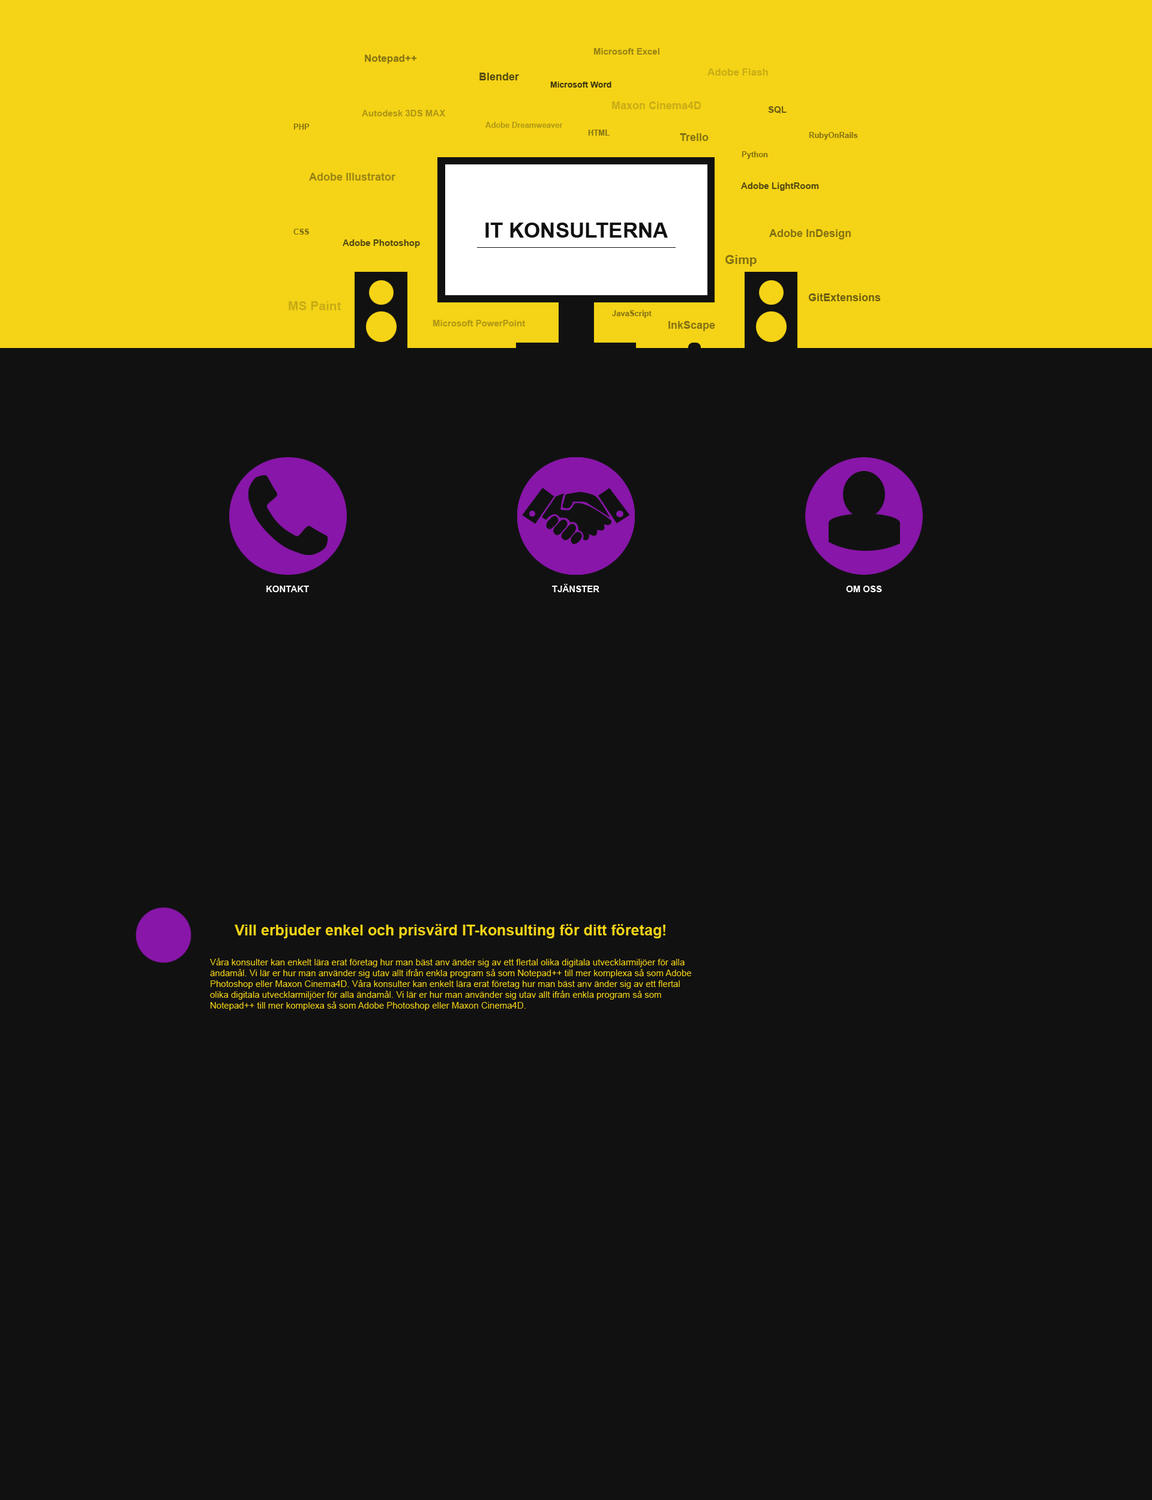
<style>
.page{position:relative;width:1152px;height:1500px;background:#111111}
.page>*{position:absolute;margin:0}
.t1{font:9px "Arial-BoldMT";color:#9a8514}
.t2{font:10.2px "Arial-BoldMT";color:#837213}
.t3{font:10.8px "Arial-BoldMT";color:#554b12}
.t4{font:10.2px "Arial-BoldMT";color:#c7ac15}
.t5{font:8.4px "Arial-BoldMT";color:#3f3812}
.t6{font:10.8px "Arial-BoldMT";color:#c7ac15}
.t7{font:9px "Arial-BoldMT";color:#b09814}
.t8{font:9px "Arial-BoldMT";color:#6c5f13}
.t9{font:7.8px "Arial-BoldMT";color:#837213}
.t10{font:7.8px "Arial-BoldMT";color:#b09814}
.t11{font:10.8px "Arial-BoldMT";color:#837213}
.t12{font:10.8px "Arial-BoldMT";color:#9a8514}
.t13{font:9px "Arial-BoldMT";color:#554b12}
.t14{font:21px "Arial-BoldMT";color:#111111}
.t15{font:12.6px "Arial-BoldMT";color:#837213}
.t16{font:10.8px "Arial-BoldMT";color:#6c5f13}
.t17{font:12.6px "Arial-BoldMT";color:#c7ac15}
.t18{font:9px "Arial-BoldMT";color:#ffffff}
.t19{font:15px "Arial-BoldMT";color:#f5d316}
.t20{font:9px "ArialMT";color:#f5d316}
</style>
<div class="page">
<p class="t1" style="left:593px;top:48px;width:66px;height:7px">Microsoft Excel</p>
<p class="t2" style="left:365px;top:55px;width:52px;height:9px">Notepad++</p>
<p class="t3" style="left:479px;top:73px;width:40px;height:7px">Blender</p>
<p class="t4" style="left:707px;top:68px;width:61px;height:8px">Adobe Flash</p>
<p class="t5" style="left:550px;top:82px;width:61px;height:6px">Microsoft Word</p>
<p class="t6" style="left:612px;top:101px;width:89px;height:8px">Maxon Cinema4D</p>
<p class="t7" style="left:362px;top:110px;width:84px;height:6px">Autodesk 3DS MAX</p>
<p class="t8" style="left:768px;top:106px;width:19px;height:7px">SQL</p>
<p class="t9" style="left:293px;top:124px;width:17px;height:6px">PHP</p>
<p class="t10" style="left:485px;top:122px;width:78px;height:6px">Adobe Dreamweaver</p>
<p class="t9" style="left:588px;top:130px;width:22px;height:6px">HTML</p>
<p class="t11" style="left:680px;top:133px;width:29px;height:8px">Trello</p>
<p class="t9" style="left:809px;top:132px;width:49px;height:8px">RubyOnRails</p>
<p class="t9" style="left:742px;top:151px;width:26px;height:8px">Python</p>
<p class="t12" style="left:309px;top:173px;width:86px;height:8px">Adobe Illustrator</p>
<p class="t13" style="left:741px;top:182px;width:78px;height:9px">Adobe LightRoom</p>
<p class="t9" style="left:293px;top:229px;width:17px;height:6px">CSS</p>
<p class="t14" style="left:485px;top:223px;width:183px;height:15px">IT KONSULTERNA</p>
<p class="t11" style="left:769px;top:229px;width:82px;height:10px">Adobe InDesign</p>
<p class="t13" style="left:343px;top:239px;width:77px;height:9px">Adobe Photoshop</p>
<p class="t15" style="left:725px;top:255px;width:32px;height:11px">Gimp</p>
<p class="t16" style="left:808px;top:293px;width:73px;height:8px">GitExtensions</p>
<p class="t17" style="left:289px;top:301px;width:52px;height:9px">MS Paint</p>
<p class="t9" style="left:612px;top:310px;width:40px;height:8px">JavaScript</p>
<p class="t7" style="left:433px;top:320px;width:92px;height:6px">Microsoft PowerPoint</p>
<p class="t11" style="left:668px;top:321px;width:47px;height:10px">InkScape</p>
<p class="t18" style="left:266px;top:586px;width:43px;height:6px">KONTAKT</p>
<p class="t18" style="left:552px;top:584px;width:47px;height:8px">TJÄNSTER</p>
<p class="t18" style="left:846px;top:586px;width:36px;height:6px">OM OSS</p>
<p class="t19" style="left:235px;top:924px;width:430px;height:14px">Vill erbjuder enkel och prisvärd IT-konsulting för ditt företag!</p>
<p class="t20" style="left:210px;top:958px;width:481px;height:52px">Våra konsulter kan enkelt lära erat företag hur man bäst anv änder sig av ett flertal olika digitala utvecklarmiljöer för alla<br>ändamål. Vi lär er hur man använder sig utav allt ifrån enkla program så som Notepad++ till mer komplexa så som Adobe<br>Photoshop eller Maxon Cinema4D. Våra konsulter kan enkelt lära erat företag hur man bäst anv änder sig av ett flertal <br>olika digitala utvecklarmiljöer för alla ändamål. Vi lär er hur man använder sig utav allt ifrån enkla program så som <br>Notepad++ till mer komplexa så som Adobe Photoshop eller Maxon Cinema4D.</p>
</div>
